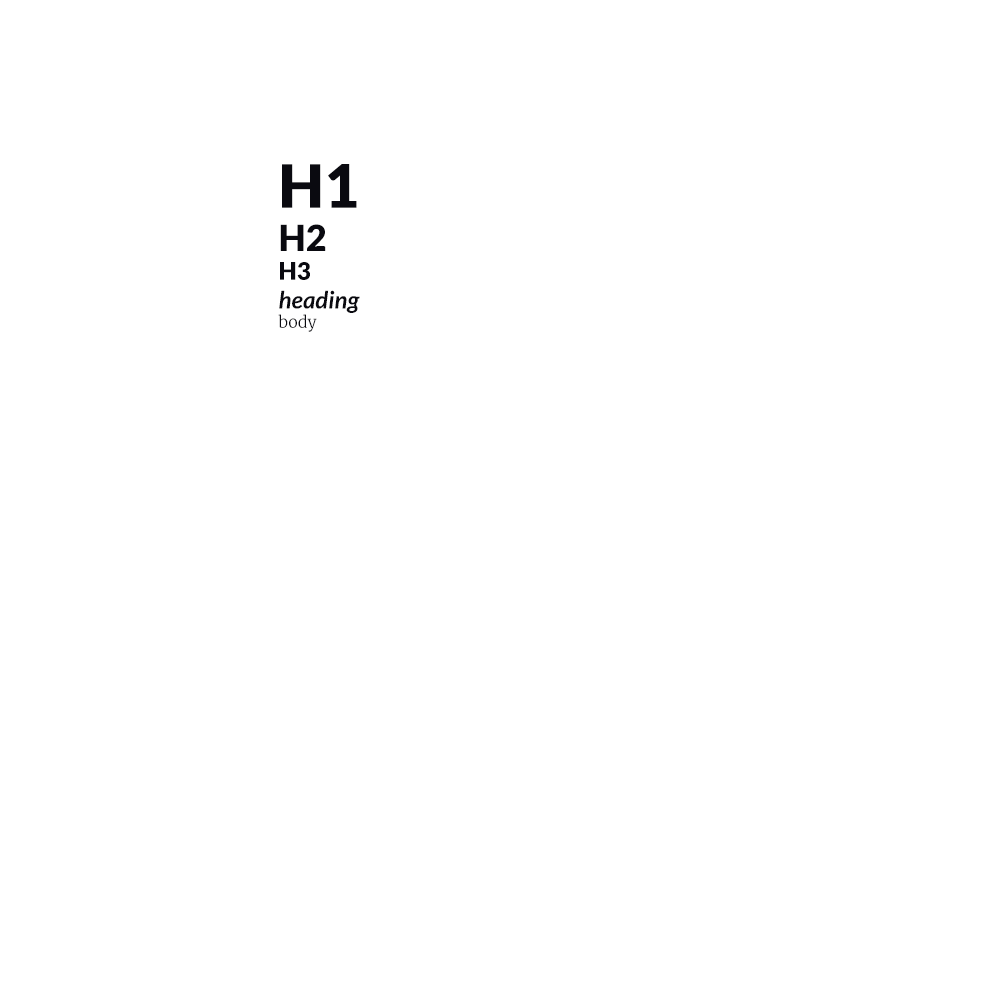
<style>
.page{position:relative;width:1000px;height:1000px;background:#ffffff}
.page>*{position:absolute;margin:0}
.t1{font:24px "Lato-BoldItalic";color:#0a0a10}
.t2{font:60px "Lato-Black";color:#0a0a10}
.t3{font:36px "Lato-Black";color:#0a0a10}
.t4{font:24px "Lato-Black";color:#0a0a10}
.t5{font:16px "Merriweather-Light";color:#0a0a10}
</style>
<div class="page">
<p class="t1" style="left:278px;top:164px;width:82px;height:168px"><span class="t2">H1<br></span><span class="t3">H2<br></span><span class="t4">H3<br></span>heading<br><span class="t5">body</span></p>
</div>
